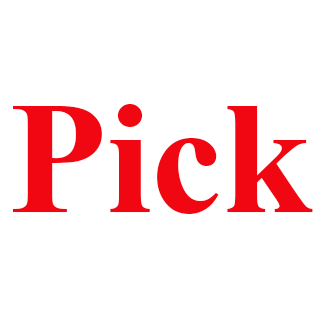
<style>
.page{position:relative;width:320px;height:320px;background:#ffffff}
.page>*{position:absolute;margin:0}
.t1{font:160px "TimesNewRomanPS-BoldMT";color:#f00712}
</style>
<div class="page">
<p class="t1" style="left:13px;top:104px;width:300px;height:110px">Pick</p>
</div>
